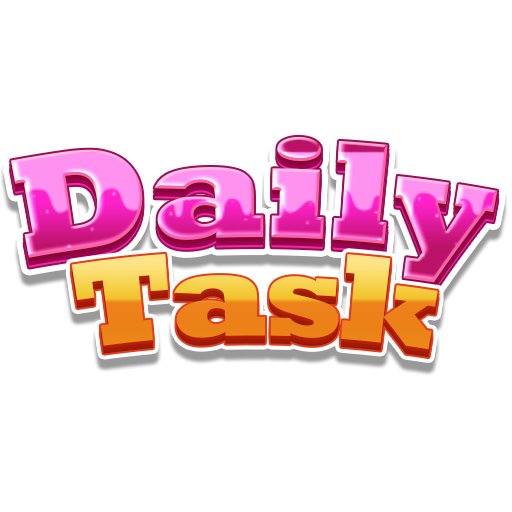
<style>
.page{position:relative;width:512px;height:512px;background:#ffffff}
.page>*{position:absolute;margin:0}
.t1{font:145.5px "Rockwell-ExtraBold"}
.t2{font:124.7px "Rockwell-ExtraBold";letter-spacing:-0.04em}
</style>
<div class="page">
<p class="t1" style="left:11px;top:136px;width:487px;height:147px">Daily</p>
<p class="t2" style="left:71px;top:253px;width:367px;height:97px">Task</p>
</div>
